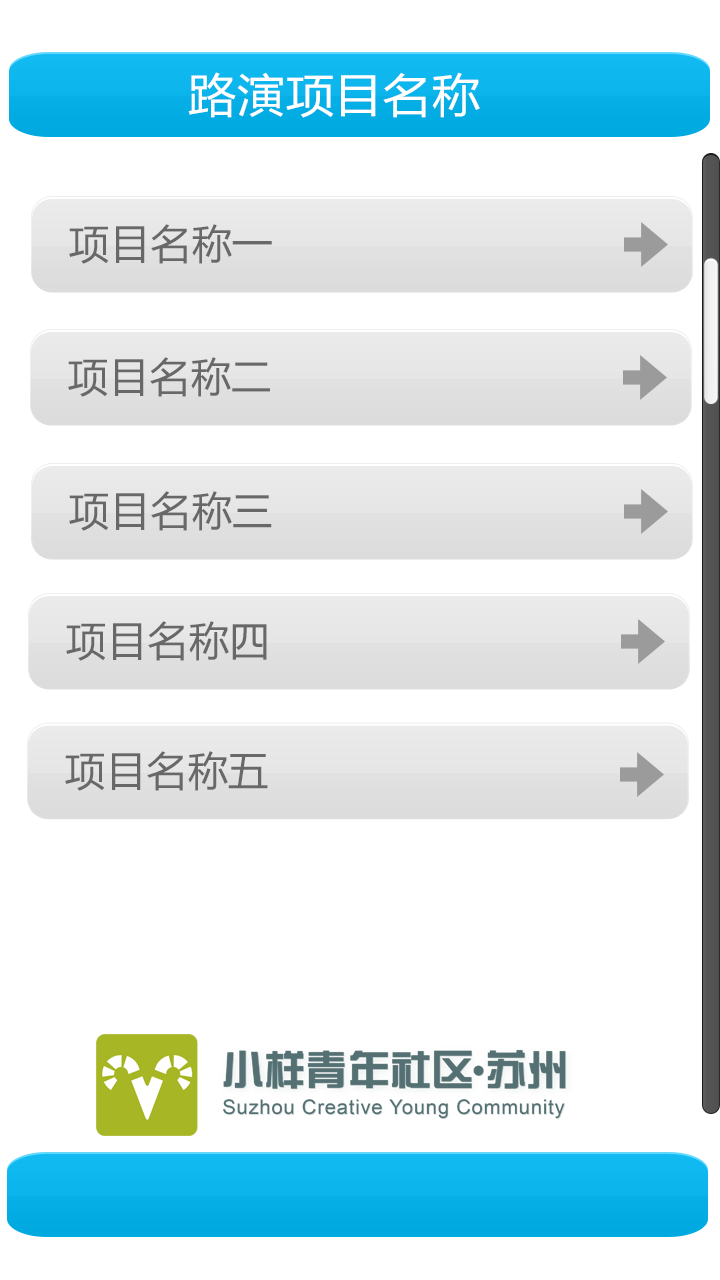
<style>
.page{position:relative;width:720px;height:1280px;background:#ffffff}
.page>*{position:absolute;margin:0}
.t1{font:45.8px "MicrosoftYaHei";letter-spacing:0.01em;color:#ffffff;scale:1.05 1}
.t2{font:40.4px "MicrosoftYaHei";letter-spacing:0.01em;color:#686868}
</style>
<div class="page">
<p class="t1" style="left:188px;top:72px;width:292px;height:46px">路演项目名称</p>
<p class="t2" style="left:69px;top:224px;width:203px;height:40px">项目名称一</p>
<p class="t2" style="left:68px;top:357px;width:202px;height:40px">项目名称二</p>
<p class="t2" style="left:69px;top:491px;width:203px;height:40px">项目名称三</p>
<p class="t2" style="left:66px;top:621px;width:201px;height:40px">项目名称四</p>
<p class="t2" style="left:65px;top:751px;width:203px;height:40px">项目名称五</p>
</div>
